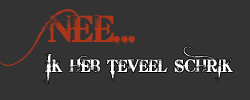
<style>
.page{position:relative;width:250px;height:100px;background:#333333}
.page>*{position:absolute;margin:0}
.t1{font:37.5px "BleedingCowboys";color:#ac351a;font-variant:small-caps}
.t2{font:25px "BleedingCowboys";color:#ffffff;font-variant:small-caps}
</style>
<div class="page">
<p class="t1" style="left:0px;top:9px;width:138px;height:57px">NEE...</p>
<p class="t2" style="left:43px;top:46px;width:190px;height:39px">Ik heb teveel schrik</p>
</div>
